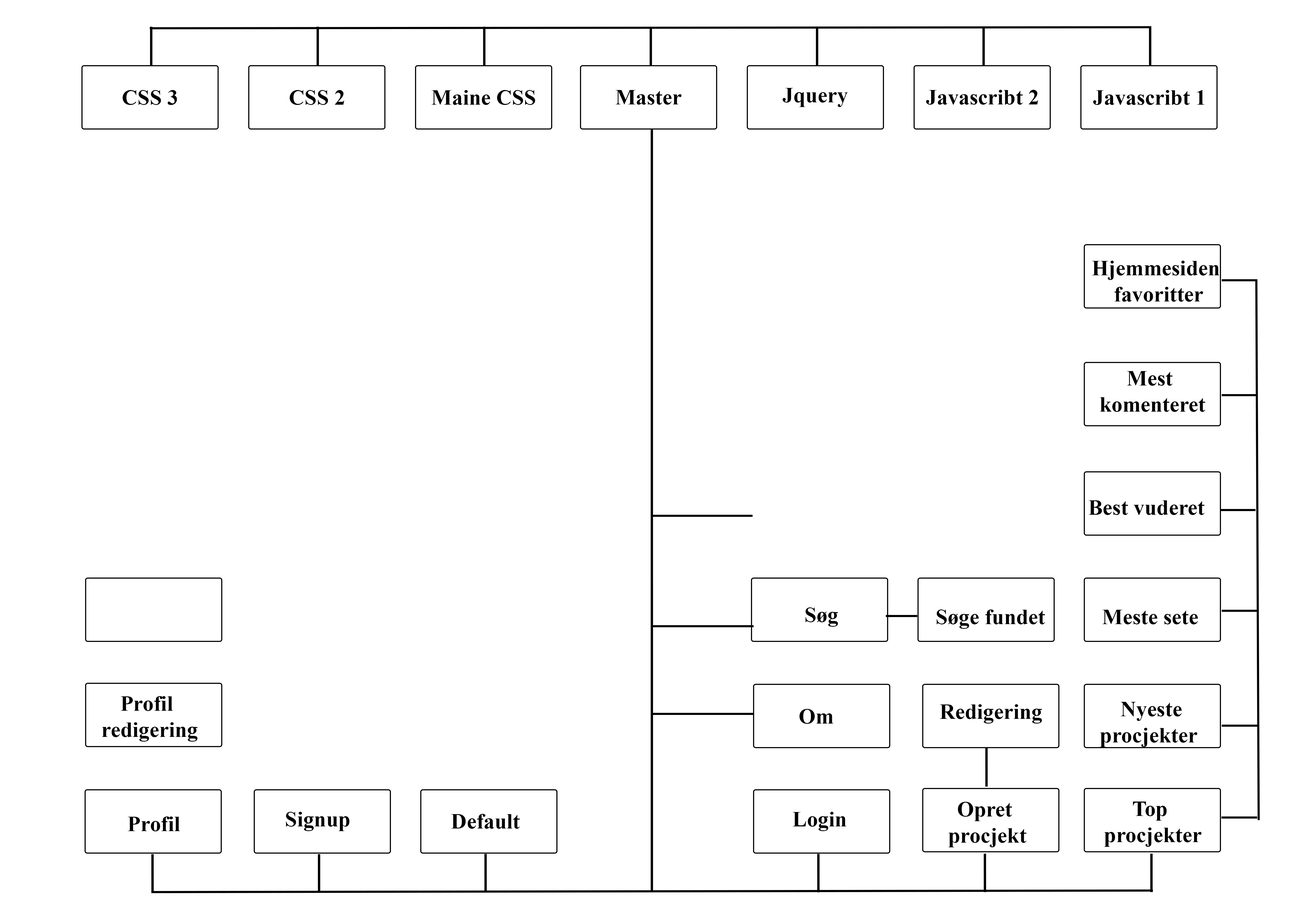
<style>
.page{position:relative;width:1299px;height:918px;background:#ffffff}
.page>*{position:absolute;margin:0}
.t1{font:21.8px "TimesNewRomanPS-BoldMT";color:#000000}
</style>
<div class="page">
<p class="t1" style="left:782px;top:88px;width:66px;height:19px">Jquery</p>
<p class="t1" style="left:926px;top:90px;width:112px;height:15px">Javascribt 2</p>
<p class="t1" style="left:123px;top:90px;width:54px;height:15px">CSS 3</p>
<p class="t1" style="left:290px;top:90px;width:54px;height:15px">CSS 2</p>
<p class="t1" style="left:431px;top:90px;width:104px;height:15px">Maine CSS</p>
<p class="t1" style="left:615px;top:90px;width:66px;height:15px">Master</p>
<p class="t1" style="left:1093px;top:90px;width:111px;height:15px">Javascribt 1</p>
<p class="t1" style="left:1092px;top:261px;width:127px;height:41px;text-align:center">Hjemmesiden <br>favoritter</p>
<p class="t1" style="left:1100px;top:371px;width:105px;height:41px;text-align:center">Mest <br>komenteret</p>
<p class="t1" style="left:1088px;top:500px;width:116px;height:15px">Best vuderet</p>
<p class="t1" style="left:805px;top:608px;width:33px;height:19px">Søg</p>
<p class="t1" style="left:936px;top:610px;width:109px;height:19px">Søge fundet</p>
<p class="t1" style="left:1102px;top:610px;width:96px;height:15px">Meste sete</p>
<p class="t1" style="left:102px;top:696px;width:95px;height:46px;text-align:center">Profil <br>redigering</p>
<p class="t1" style="left:799px;top:709px;width:34px;height:15px">Om</p>
<p class="t1" style="left:939px;top:704px;width:103px;height:20px">Redigering</p>
<p class="t1" style="left:1100px;top:702px;width:97px;height:45px;text-align:center">Nyeste<br>procjekter</p>
<p class="t1" style="left:948px;top:802px;width:78px;height:46px;text-align:center">Opret <br>procjekt</p>
<p class="t1" style="left:1104px;top:802px;width:97px;height:45px;text-align:center">Top <br> procjekter</p>
<p class="t1" style="left:128px;top:817px;width:52px;height:15px">Profil</p>
<p class="t1" style="left:286px;top:812px;width:63px;height:19px">Signup</p>
<p class="t1" style="left:451px;top:814px;width:69px;height:15px">Default</p>
<p class="t1" style="left:792px;top:812px;width:54px;height:19px">Login</p>
</div>
